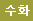
<style>
.page{position:relative;width:33px;height:21px;background:#9f9f3a}
.page>*{position:absolute;margin:0}
.t1{font:12px "Dotum";color:#ffffff;font-weight:bold}
</style>
<div class="page">
<p class="t1" style="left:5px;top:5px;width:25px;height:11px">수화</p>
</div>
